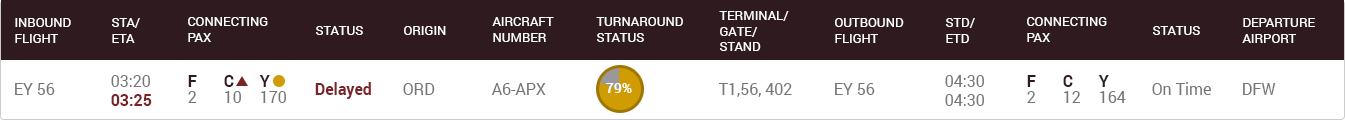
<style>
.page{position:relative;width:1345px;height:120px;background:#2f1b1f}
.page>*{position:absolute;margin:0}
.t1{font:13px "Roboto-Regular";color:#ffffff;text-transform:uppercase}
.t2{font:16px "Roboto-Regular";color:#767676}
.t3{font:16px "Roboto-Bold";color:#7b2326}
.t4{font:16px/16px "Roboto-Regular";color:#767676}
.t5{font:16px/16px "Roboto-Bold";color:#2f1b1f}
.t6{font:14px "Roboto-Bold";color:#fefefe}
</style>
<div class="page">
<p class="t1" style="left:188px;top:17px;width:80px;height:25px">Connecting<br>PAX</p>
<p class="t1" style="left:492px;top:17px;width:62px;height:25px">Aircraft<br>Number</p>
<p class="t1" style="left:596px;top:17px;width:87px;height:25px">Turnaround<br>Status</p>
<p class="t1" style="left:719px;top:11px;width:70px;height:40px">Terminal/<br>Gate/<br>Stand</p>
<p class="t1" style="left:1027px;top:17px;width:80px;height:25px">Connecting<br>PAX</p>
<p class="t1" style="left:15px;top:18px;width:56px;height:25px">Inbound<br>Flight</p>
<p class="t1" style="left:112px;top:18px;width:28px;height:25px">STA/<br>ETA</p>
<p class="t1" style="left:316px;top:26px;width:47px;height:9px">Status</p>
<p class="t1" style="left:404px;top:26px;width:42px;height:9px">Origin</p>
<p class="t1" style="left:835px;top:18px;width:69px;height:25px">Outbound<br>Flight</p>
<p class="t1" style="left:946px;top:18px;width:29px;height:25px">STD/<br>etd</p>
<p class="t1" style="left:1153px;top:26px;width:47px;height:9px">Status</p>
<p class="t1" style="left:1242px;top:18px;width:73px;height:25px">Departure<br>Airport</p>
<p class="t2" style="left:111px;top:75px;width:41px;height:31px">03:20<br><span class="t3">03:25</span></p>
<p class="t4" style="left:188px;top:75px;width:98px;height:28px"><span class="t5">F C Y<br></span>2 10 170</p>
<p class="t2" style="left:945px;top:75px;width:39px;height:31px">04:30<br>04:30</p>
<p class="t4" style="left:1027px;top:75px;width:99px;height:28px"><span class="t5">F C Y<br></span>2 12 164</p>
<p class="t2" style="left:15px;top:83px;width:40px;height:12px">EY 56</p>
<p class="t3" style="left:315px;top:82px;width:56px;height:17px">Delayed</p>
<p class="t2" style="left:403px;top:83px;width:32px;height:12px">ORD</p>
<p class="t2" style="left:491px;top:83px;width:55px;height:12px">A6-APX</p>
<p class="t6" style="left:606px;top:83px;width:26px;height:10px">79%</p>
<p class="t2" style="left:718px;top:83px;width:74px;height:14px">T1,56, 402</p>
<p class="t2" style="left:835px;top:83px;width:40px;height:12px">EY 56</p>
<p class="t2" style="left:1152px;top:82px;width:59px;height:13px">On Time</p>
<p class="t2" style="left:1243px;top:83px;width:33px;height:12px">DFW</p>
</div>
